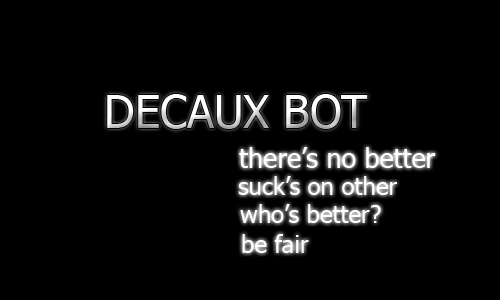
<style>
.page{position:relative;width:500px;height:300px;background:#000000}
.page>*{position:absolute;margin:0}
.t1{font:45px "Tahoma"}
.t2{font:27px "Tahoma";color:#ffffff}
.t3{font:24px "Tahoma";color:#ffffff}
</style>
<div class="page">
<p class="t1" style="left:107px;top:94px;width:261px;height:35px">DECAUX BOT</p>
<p class="t2" style="left:239px;top:147px;width:197px;height:21px">there’s no better</p>
<p class="t3" style="left:238px;top:176px;width:159px;height:19px">suck’s on other</p>
<p class="t3" style="left:240px;top:204px;width:141px;height:19px">who’s better?</p>
<p class="t3" style="left:242px;top:234px;width:67px;height:19px">be fair</p>
</div>
